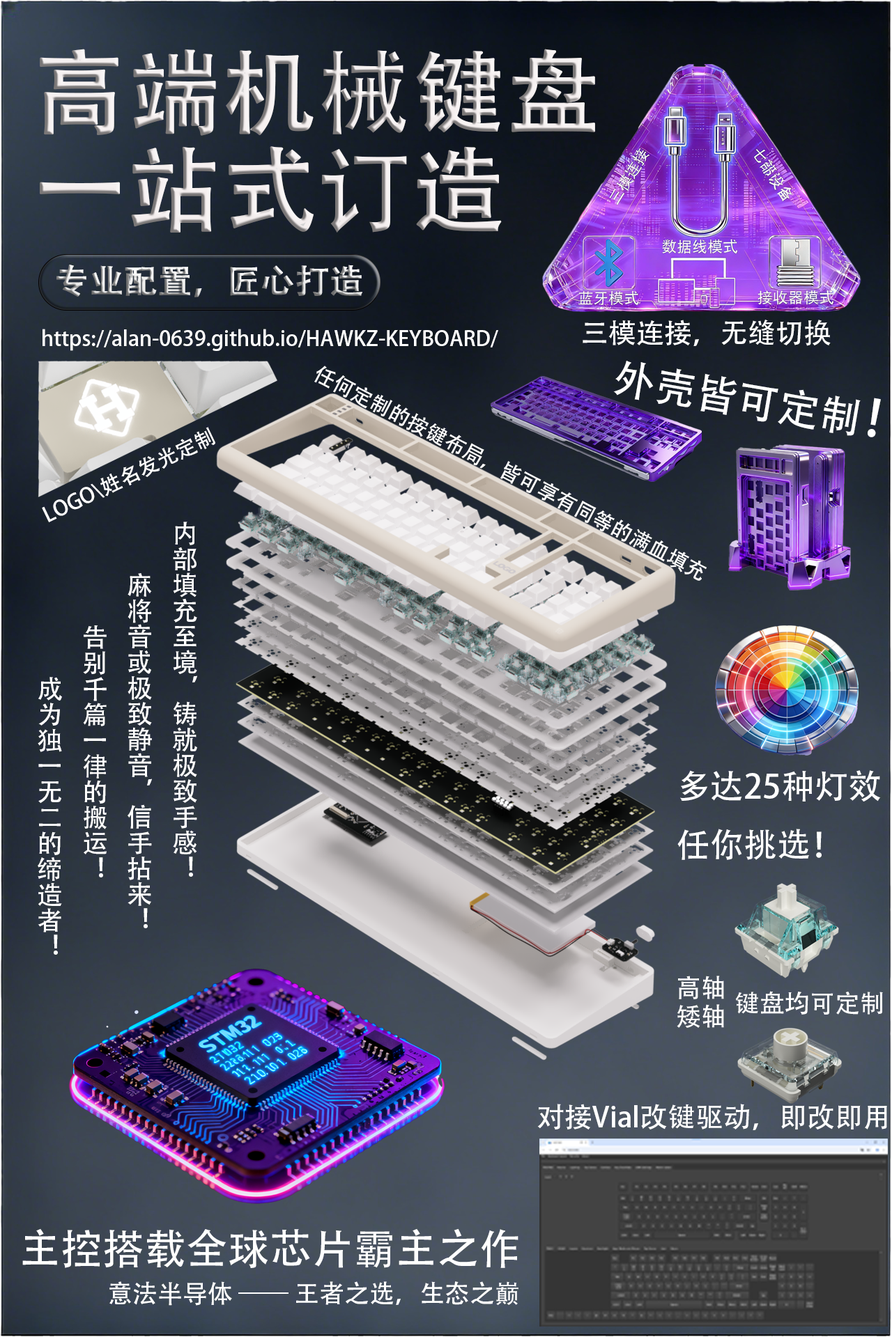
<style>
.page{position:relative;width:892px;height:1337px}
.page>*{position:absolute;margin:0}
.t1{font:20.9px "AdobeHeitiStd-Regular";color:#ffffff}
.t2{font:27.9px "AdobeHeitiStd-Regular";color:#ffffff}
.t3{font:41.8px "AdobeHeitiStd-Regular";color:#ffffff}
.t4{font:50.2px "AdobeHeitiStd-Regular";color:#ffffff}
.t5{font:25.8px "AdobeHeitiStd-Regular";color:#ffffff}
.t6{font:33.4px "AdobeHeitiStd-Regular";color:#ffffff}
.t7{font:25.1px "AdobeHeitiStd-Regular";color:#ffffff}
</style>
<div class="page">
<p class="t1" style="left:42px;top:329px;width:456px;height:22px">https://alan-0639.github.io/HAWKZ-KEYBOARD/</p>
<p class="t2" style="left:582px;top:320px;width:248px;height:26px">三模连接，无缝切换</p>
<p class="t3" style="left:613px;top:361px;width:267px;height:76px;rotate:10deg">外壳皆可定制<span class="t4">！</span></p>
<p class="t1" style="left:42px;top:427px;width:173px;height:95px;rotate:-26deg">LOGO\姓名发光定制</p>
<p class="t5" style="left:38px;top:522px;width:159px;height:433px">内部填充至境，铸就极致手感！<br>         麻将音或极致静音，信手拈来！<br>                  告别千篇一律的搬运！<br>                           成为独一无二的缔造者！</p>
<p class="t6" style="left:677px;top:770px;width:203px;height:90px">多达25种灯效<br>任你挑选！</p>
<p class="t7" style="left:678px;top:976px;width:46px;height:24px">高轴</p>
<p class="t7" style="left:735px;top:991px;width:148px;height:24px">键盘均可定制</p>
<p class="t7" style="left:676px;top:1004px;width:48px;height:24px">矮轴</p>
<p class="t2" style="left:537px;top:1104px;width:350px;height:27px">对接Vial改键驱动，即改即用</p>
<p class="t3" style="left:22px;top:1229px;width:496px;height:39px">主控搭载全球芯片霸主之作</p>
<p class="t7" style="left:109px;top:1282px;width:409px;height:24px">意法半导体 —— 王者之选，生态之巅</p>
</div>
